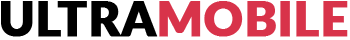
<style>
.page{position:relative;width:350px;height:40px;background:#ffffff}
.page>*{position:absolute;margin:0}
.t1{font:48px "Lato-Black";color:#d8334a;font-weight:bold}
.t2{font:48px "Lato-Black";color:#000000;font-weight:bold}
</style>
<div class="page">
<p class="t1" style="left:1px;top:1px;width:347px;height:36px"><span class="t2">ULTRA</span>MOBILE</p>
</div>
